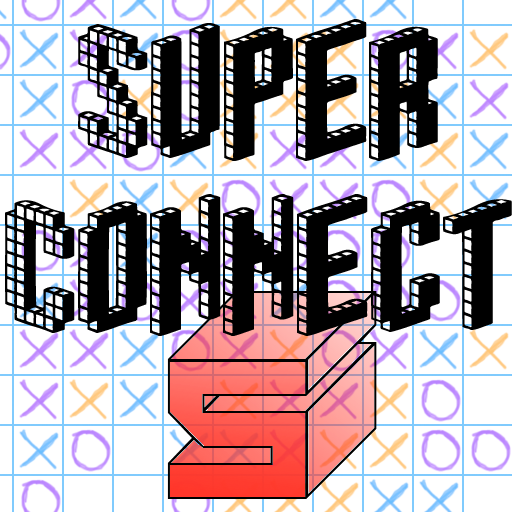
<style>
.page{position:relative;width:512px;height:512px;background:#ffffff}
.page>*{position:absolute;margin:0}
.t1{font:146px "Blox-BRK";color:#000000}
.t2{font:96px "Cube";color:#000000}
</style>
<div class="page">
<p class="t1" style="left:5px;top:19px;width:507px;height:317px;text-align:center">Super<br>Connect</p>
<p class="t2" style="left:167px;top:291px;width:210px;height:208px;text-align:center">5</p>
</div>
